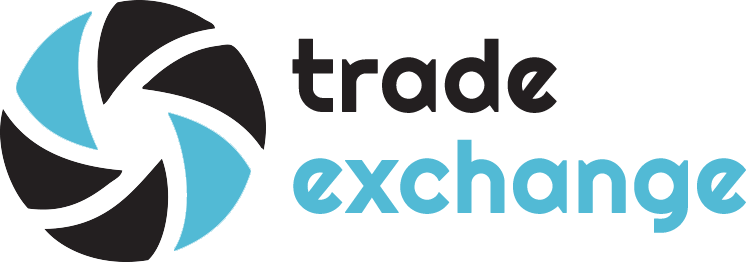
<style>
.page{position:relative;width:746px;height:262px;background:#ffffff}
.page>*{position:absolute;margin:0}
.t1{font:99px/101px "Righteous-Regular";color:#52bad5;font-weight:bold}
.t2{font:99px/101px "Righteous-Regular";color:#231f20;font-weight:bold}
</style>
<div class="page">
<p class="t1" style="left:292px;top:38px;width:454px;height:195px"><span class="t2">trade <br></span>exchange</p>
</div>
